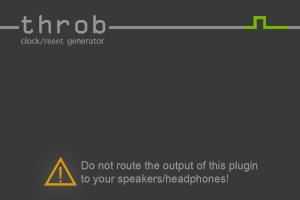
<style>
.page{position:relative;width:300px;height:200px;background:#393939}
.page>*{position:absolute;margin:0}
.t1{font:25px "OCRAStd";color:#969696}
.t2{font:11px "AppleSymbols";color:#969696}
.t3{font:40px "AppleSymbols";color:#dd9d02}
.t4{font:11px "ArialMT";color:#969696}
</style>
<div class="page">
<p class="t1" style="left:21px;top:15px;width:85px;height:19px">throb</p>
<p class="t2" style="left:21px;top:37px;width:84px;height:9px">clock/reset generator</p>
<p class="t3" style="left:44px;top:157px;width:33px;height:29px">⚠</p>
<p class="t4" style="left:81px;top:161px;width:177px;height:24px">Do not route the output of this plugin <br>to your speakers/headphones!</p>
</div>
